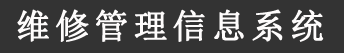
<style>
.page{position:relative;width:344px;height:53px;background:#333333}
.page>*{position:absolute;margin:0}
.t1{font:34px "SimSun";letter-spacing:0.125em;color:#fefcfc;text-transform:uppercase;font-weight:bold}
</style>
<div class="page">
<p class="t1" style="left:17px;top:9px;width:307px;height:33px">维修管理信息系统</p>
</div>
